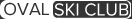
<style>
.page{position:relative;width:132px;height:19px;background:#ffffff}
.page>*{position:absolute;margin:0}
.t1{font:18px "ProximaNova-Regular";color:#ffffff}
</style>
<div class="page">
<p class="t1" style="left:54px;top:3px;width:75px;height:13px">SKI CLUB</p>
</div>
